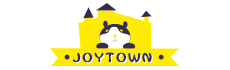
<style>
.page{position:relative;width:230px;height:70px;background:#ffffff}
.page>*{position:absolute;margin:0}
.t1{font:14.5px "FZSEJW--GB1-0";letter-spacing:0.1em;color:#352d51}
</style>
<div class="page">
<p class="t1" style="left:72px;top:52px;width:80px;height:11px">JOYTOWN</p>
</div>
